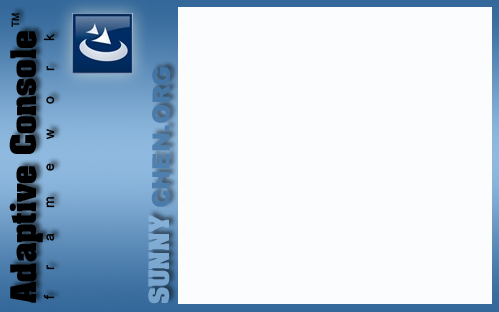
<style>
.page{position:relative;width:499px;height:312px;background:#fbfcfd}
.page>*{position:absolute;margin:0}
.t1{font:10px "ArialMT";color:#000000}
.t2{font:30px "AardvarkBold";color:#000000}
.t3{font:14px "ArialMT";letter-spacing:1.78em;color:#000000}
.t4{font:24px "Arial-Black";color:#4c7dac}
.t5{font:24px "AardvarkBold";color:#8fb9df}
</style>
<div class="page">
<p class="t1" style="left:11px;top:13px;width:9px;height:14px;rotate:-90deg">TM</p>
<p class="t2" style="left:9px;top:31px;width:34px;height:272px;rotate:-90deg">Adaptive Console</p>
<p class="t3" style="left:43px;top:34px;width:12px;height:266px;rotate:-90deg">framework</p>
<p class="t4" style="left:151px;top:67px;width:19px;height:140px;rotate:-90deg">CHEN.ORG</p>
<p class="t5" style="left:148px;top:215px;width:22px;height:89px;rotate:-90deg;opacity:0.7">SUNNY</p>
</div>
